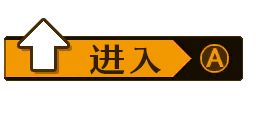
<style>
.page{position:relative;width:256px;height:128px;background:#ffffff}
.page>*{position:absolute;margin:0}
.t1{font:33.3px "FZYASHS_ZHONG--GB1-0";letter-spacing:0.125em;color:#301f00;scale:1.1 1}
.t2{font:29.3px "SkipStd-B";letter-spacing:0.125em;color:#301f00;scale:1.1 1}
</style>
<div class="page">
<p class="t1" style="left:90px;top:44px;width:35px;height:31px">进</p>
<p class="t2" style="left:130px;top:47px;width:31px;height:27px">入</p>
</div>
